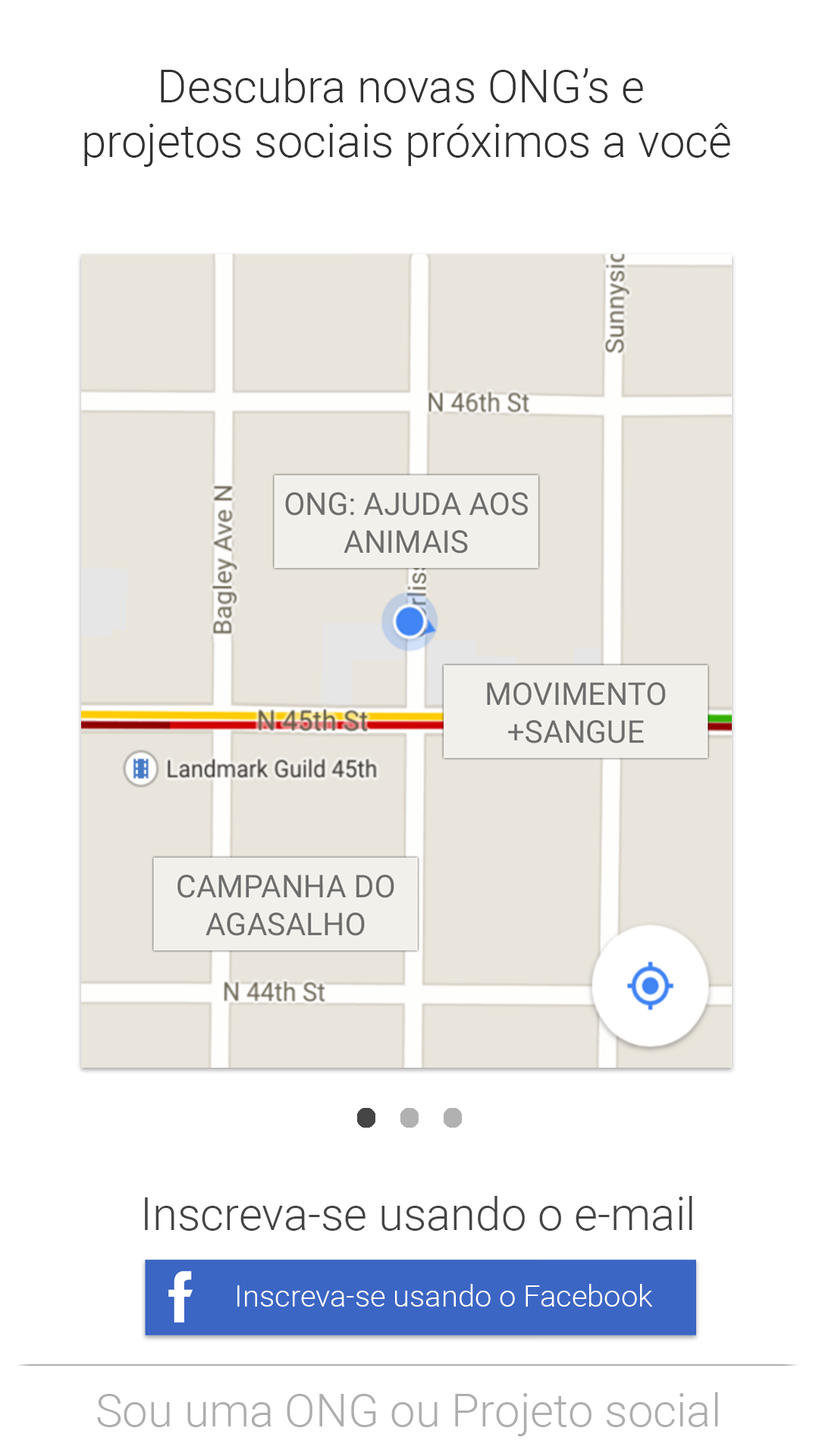
<style>
.page{position:relative;width:819px;height:1456px;background:#ffffff}
.page>*{position:absolute;margin:0}
.t1{font:45.5px "Roboto-Light";color:#313131}
.t2{font:45.5px "Roboto-Light";color:#444444}
.t3{font:30.3px "Roboto-Light";color:#ffffff}
.t4{font:45.5px "Roboto-Light";color:#aeaeae}
</style>
<div class="page">
<p class="t1" style="left:84px;top:68px;width:646px;height:99px;text-align:center">Descubra novas ONG’s e <br>projetos sociais próximos a você</p>
<p class="t2" style="left:145px;top:1196px;width:547px;height:35px">Inscreva-se usando o e-mail</p>
<p class="t3" style="left:237px;top:1284px;width:416px;height:23px">Inscreva-se usando o Facebook</p>
<p class="t4" style="left:97px;top:1392px;width:621px;height:44px">Sou uma ONG ou Projeto social</p>
</div>
